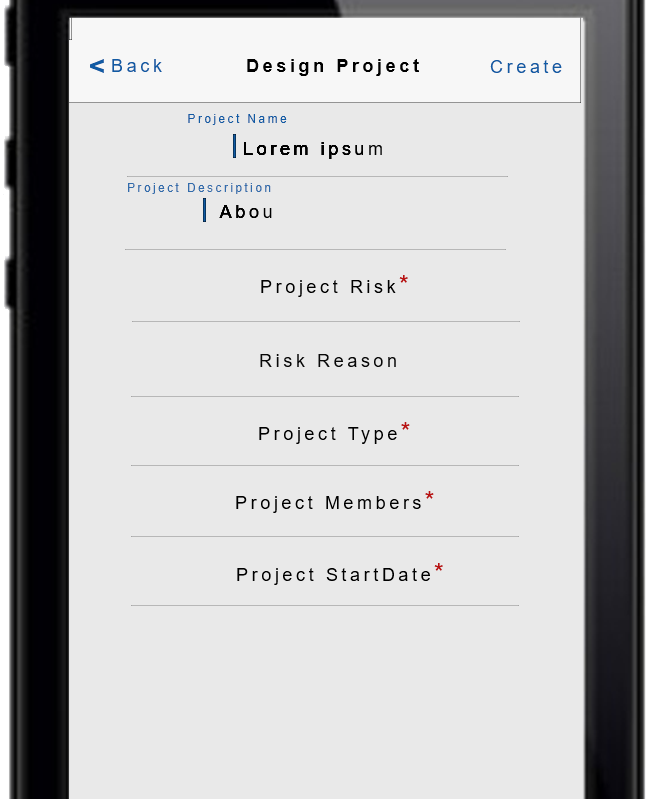
<style>
.page{position:relative;width:657px;height:799px;background:#e9e9e9}
.page>*{position:absolute;margin:0}
.t1{font:30px "SourceSansPro-Bold";letter-spacing:0.2em;color:#115ba4}
.t2{font:18px "ArialMT";letter-spacing:0.2em;color:#115ba4}
.t3{font:18px "Arial-BoldMT";letter-spacing:0.2em;color:#000000}
.t4{font:12px "ArialMT";letter-spacing:0.2em;color:#115ba4}
.t5{font:18px "ArialMT";letter-spacing:0.2em;color:#000000}
.t6{font:12px "ArialMT";letter-spacing:0.2em;color:#326cab}
.t7{font:24px "HelveticaNeue-MediumCond";letter-spacing:0.2em;color:#b91111}
.t8{font:18px "ArialMT";letter-spacing:0.2em;color:#090909}
</style>
<div class="page">
<p class="t1" style="left:90px;top:59px;width:14px;height:14px">&lt;</p>
<p class="t2" style="left:112px;top:59px;width:50px;height:13px">Back</p>
<p class="t3" style="left:247px;top:59px;width:172px;height:17px">Design Project</p>
<p class="t2" style="left:490px;top:60px;width:72px;height:13px">Create</p>
<p class="t4" style="left:188px;top:114px;width:99px;height:11px">Project Name</p>
<p class="t5" style="left:244px;top:142px;width:138px;height:17px">Lorem ipsum</p>
<p class="t5" style="left:244px;top:142px;width:119px;height:17px">Lorem ipsu</p>
<p class="t5" style="left:244px;top:142px;width:107px;height:17px">Lorem ips</p>
<p class="t5" style="left:244px;top:142px;width:94px;height:17px">Lorem ip</p>
<p class="t5" style="left:244px;top:142px;width:80px;height:13px">Lorem i</p>
<p class="t5" style="left:244px;top:142px;width:64px;height:13px">Lorem</p>
<p class="t5" style="left:244px;top:142px;width:46px;height:13px">Lore</p>
<p class="t5" style="left:244px;top:142px;width:33px;height:13px">Lor</p>
<p class="t5" style="left:244px;top:142px;width:22px;height:13px">Lo</p>
<p class="t5" style="left:244px;top:142px;width:9px;height:13px">L</p>
<p class="t6" style="left:128px;top:183px;width:143px;height:11px">Project Description</p>
<p class="t5" style="left:219px;top:205px;width:53px;height:13px">Abou</p>
<p class="t5" style="left:219px;top:205px;width:40px;height:13px">Abo</p>
<p class="t5" style="left:219px;top:205px;width:26px;height:13px">Ab</p>
<p class="t5" style="left:219px;top:205px;width:13px;height:13px">A</p>
<p class="t5" style="left:261px;top:275px;width:147px;height:22px">Project Risk<span class="t7">*</span></p>
<p class="t8" style="left:260px;top:354px;width:136px;height:13px">Risk Reason</p>
<p class="t5" style="left:259px;top:422px;width:151px;height:22px">Project Type<span class="t7">*</span></p>
<p class="t5" style="left:236px;top:491px;width:198px;height:22px">Project Members<span class="t7">*</span></p>
<p class="t5" style="left:237px;top:563px;width:206px;height:22px">Project StartDate<span class="t7">*</span></p>
</div>
